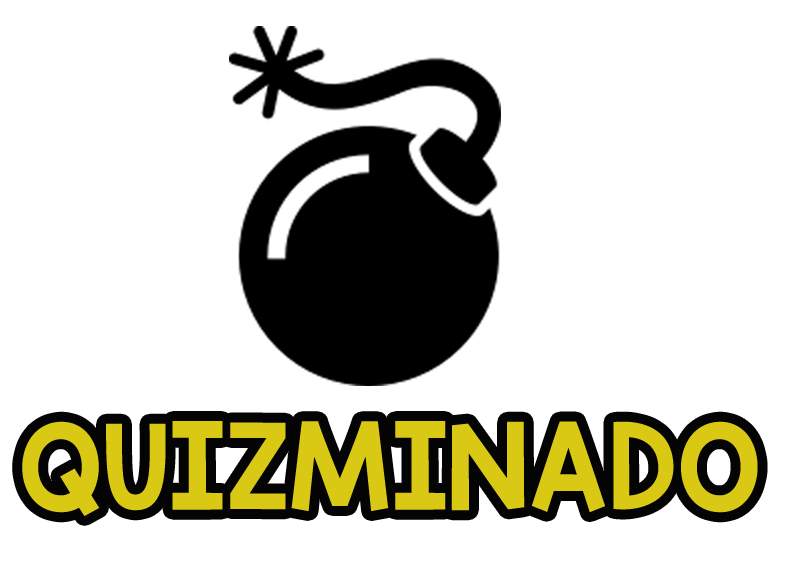
<style>
.page{position:relative;width:800px;height:561px;background:#ffffff}
.page>*{position:absolute;margin:0}
.t1{font:100px "KGBlankSpaceSolid";color:#d9c915}
</style>
<div class="page">
<p class="t1" style="left:22px;top:421px;width:736px;height:95px">QUIZMINADO</p>
</div>
